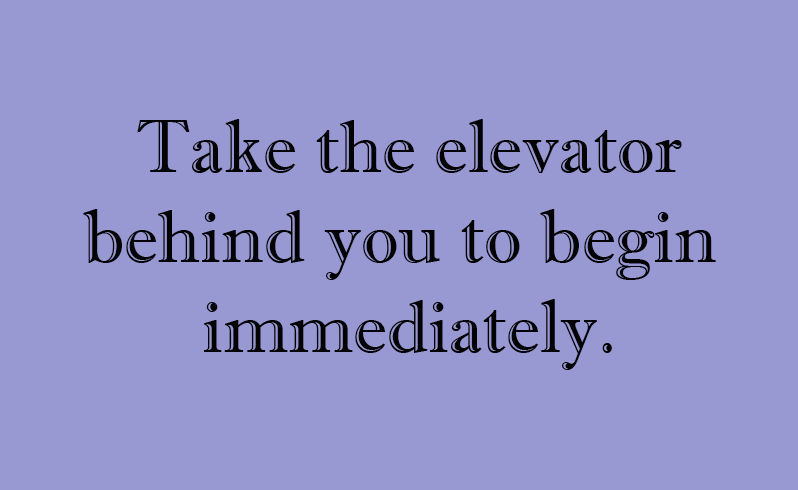
<style>
.page{position:relative;width:798px;height:490px;background:#9898d3}
.page>*{position:absolute;margin:0}
.t1{font:74.8px "ImprintMT-Shadow";color:#030303}
</style>
<div class="page">
<p class="t1" style="left:83px;top:119px;width:633px;height:251px;text-align:center">Take the elevator<br>behind you to begin <br>immediately.</p>
</div>
